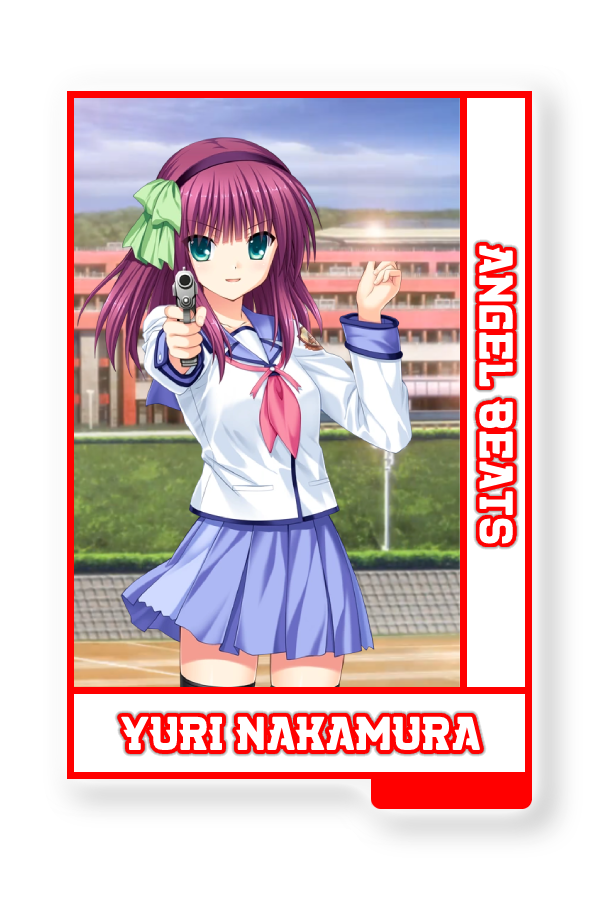
<style>
.page{position:relative;width:600px;height:900px;background:#ffffff}
.page>*{position:absolute;margin:0}
.t1{font:48.8px "KillerCollege";color:#ffffff}
.t2{font:48.6px "KillerCollege";color:#ffffff}
</style>
<div class="page">
<p class="t1" style="left:479px;top:245px;width:34px;height:299px;rotate:90deg">Angel Beats</p>
<p class="t2" style="left:120px;top:716px;width:361px;height:35px">YURI NAKAMURA</p>
</div>
